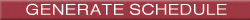
<style>
.page{position:relative;width:250px;height:20px}
.page>*{position:absolute;margin:0}
.t1{font:15px "Helvetica";color:#ffffff;scale:1.2 1}
</style>
<div class="page">
<p class="t1" style="left:26px;top:3px;width:201px;height:12px">GENERATE SCHEDULE</p>
</div>
